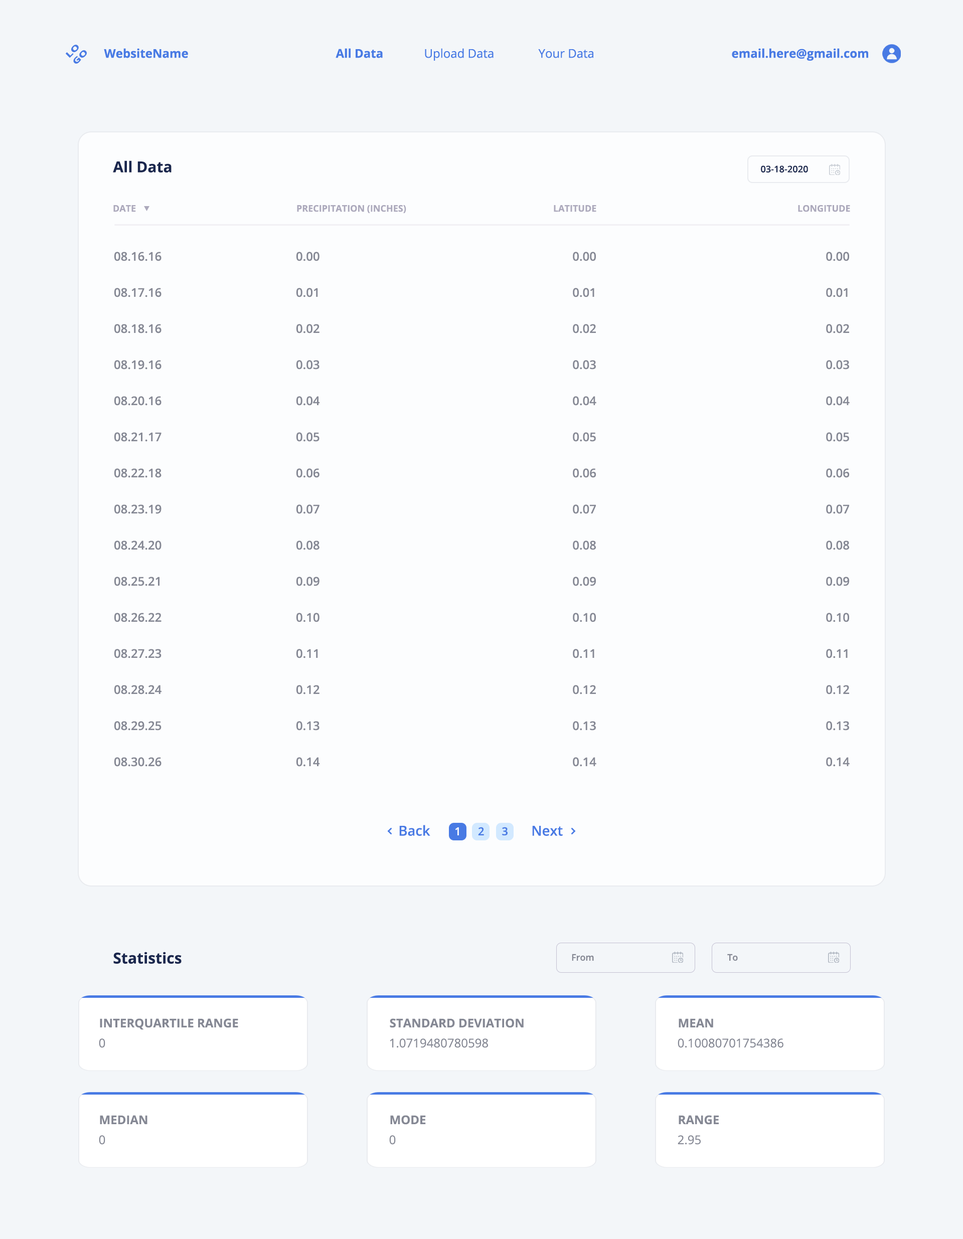
<style>
.page{position:relative;width:963px;height:1239px;background:#fcfdfe}
.page>*{position:absolute;margin:0}
.t1{font:8px "OpenSans-Bold";color:#487ae4;scale:1.45 1}
.t2{font:12px "OpenSans-Bold";color:#487ae4}
.t3{font:12px "OpenSans";color:#487ae4}
.t4{font:15px "OpenSans-Bold";color:#1a274e}
.t5{font:9.1px "OpenSans-Semibold";color:#1a274e}
.t6{font:9px "OpenSans-Bold";color:#aca9bc}
.t7{font:12px/36.1px "OpenSans-Semibold";color:#858894}
.t8{font:13.7px "OpenSans-Semibold";color:#487ae4}
.t9{font:11px "OpenSans-Semibold";color:#ffffff}
.t10{font:11px "OpenSans-Semibold";color:#487ae4}
.t11{font:9px "OpenSans-Semibold";color:#858894}
.t12{font:12px "OpenSans-Bold";color:#858894;text-transform:uppercase}
.t13{font:12px "OpenSans";color:#858894;text-transform:uppercase}
</style>
<div class="page">
<p class="t1" style="left:66px;top:45px;width:21px;height:19px;rotate:-45deg">LO<br>GO</p>
<p class="t2" style="left:104px;top:48px;width:84px;height:10px">WebsiteName</p>
<p class="t2" style="left:335px;top:48px;width:48px;height:10px">All Data</p>
<p class="t3" style="left:425px;top:48px;width:68px;height:13px">Upload Data</p>
<p class="t3" style="left:538px;top:49px;width:55px;height:9px">Your Data</p>
<p class="t2" style="left:731px;top:48px;width:137px;height:13px">email.here@gmail.com</p>
<p class="t4" style="left:113px;top:160px;width:58px;height:12px">All Data</p>
<p class="t5" style="left:761px;top:165px;width:47px;height:7px">03-18-2020</p>
<p class="t6" style="left:113px;top:205px;width:23px;height:7px">DATE</p>
<p class="t6" style="left:297px;top:205px;width:109px;height:8px">PRECIPITATION (INCHES)</p>
<p class="t6" style="left:553px;top:205px;width:43px;height:7px">LATITUDE</p>
<p class="t6" style="left:798px;top:205px;width:52px;height:7px">LONGITUDE</p>
<p class="t7" style="left:114px;top:252px;width:47px;height:515px">08.16.16<br>08.17.16<br>08.18.16<br>08.19.16<br>08.20.16<br>08.21.17<br>08.22.18<br>08.23.19<br>08.24.20<br>08.25.21<br>08.26.22<br>08.27.23<br>08.28.24<br>08.29.25<br>08.30.26</p>
<p class="t7" style="left:296px;top:252px;width:24px;height:515px">0.00<br>0.01<br>0.02<br>0.03<br>0.04<br>0.05<br>0.06<br>0.07<br>0.08<br>0.09<br>0.10<br>0.11<br>0.12<br>0.13<br>0.14</p>
<p class="t7" style="left:573px;top:252px;width:23px;height:515px;text-align:right">0.00<br>0.01<br>0.02<br>0.03<br>0.04<br>0.05<br>0.06<br>0.07<br>0.08<br>0.09<br>0.10<br>0.11<br>0.12<br>0.13<br>0.14</p>
<p class="t7" style="left:826px;top:252px;width:23px;height:515px;text-align:right">0.00<br>0.01<br>0.02<br>0.03<br>0.04<br>0.05<br>0.06<br>0.07<br>0.08<br>0.09<br>0.10<br>0.11<br>0.12<br>0.13<br>0.14</p>
<p class="t8" style="left:399px;top:825px;width:31px;height:11px">Back</p>
<p class="t9" style="left:455px;top:827px;width:4px;height:8px">1</p>
<p class="t10" style="left:478px;top:827px;width:6px;height:8px">2</p>
<p class="t10" style="left:502px;top:827px;width:5px;height:8px">3</p>
<p class="t8" style="left:532px;top:826px;width:31px;height:10px">Next</p>
<p class="t4" style="left:113px;top:952px;width:68px;height:12px">Statistics</p>
<p class="t11" style="left:572px;top:954px;width:22px;height:7px">From</p>
<p class="t11" style="left:727px;top:954px;width:10px;height:7px">To</p>
<p class="t12" style="left:100px;top:1018px;width:138px;height:12px">Interquartile Range</p>
<p class="t12" style="left:390px;top:1018px;width:133px;height:10px">Standard Deviation</p>
<p class="t12" style="left:678px;top:1018px;width:35px;height:9px">mean</p>
<p class="t13" style="left:99px;top:1038px;width:6px;height:10px">0</p>
<p class="t13" style="left:390px;top:1038px;width:98px;height:10px">1.0719480780598</p>
<p class="t13" style="left:677px;top:1038px;width:106px;height:10px">0.10080701754386</p>
<p class="t12" style="left:100px;top:1115px;width:47px;height:9px">median</p>
<p class="t12" style="left:390px;top:1115px;width:36px;height:9px">mode</p>
<p class="t12" style="left:678px;top:1115px;width:40px;height:9px">range</p>
<p class="t13" style="left:99px;top:1135px;width:6px;height:10px">0</p>
<p class="t13" style="left:389px;top:1135px;width:7px;height:10px">0</p>
<p class="t13" style="left:677px;top:1135px;width:23px;height:10px">2.95</p>
</div>
